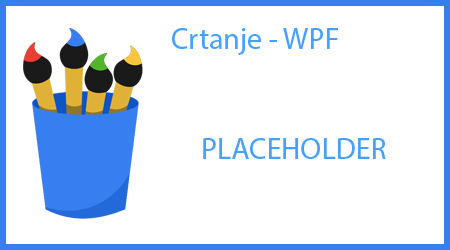
<style>
.page{position:relative;width:450px;height:250px;background:#ffffff}
.page>*{position:absolute;margin:0}
.t1{font:30px "MyriadPro-Regular";color:#45a1ff}
</style>
<div class="page">
<p class="t1" style="left:172px;top:28px;width:166px;height:27px">Crtanje - WPF</p>
<p class="t1" style="left:203px;top:138px;width:183px;height:21px">PLACEHOLDER</p>
</div>
